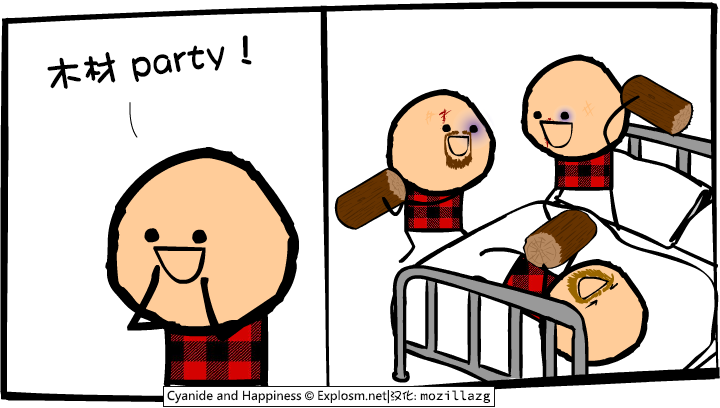
<style>
.page{position:relative;width:720px;height:408px;background:#ffffff}
.page>*{position:absolute;margin:0}
.t1{font:36px "DFGirl";color:#000000;font-weight:bold}
</style>
<div class="page">
<p class="t1" style="left:47px;top:35px;width:205px;height:54px;rotate:-8deg">木材 party！</p>
</div>
